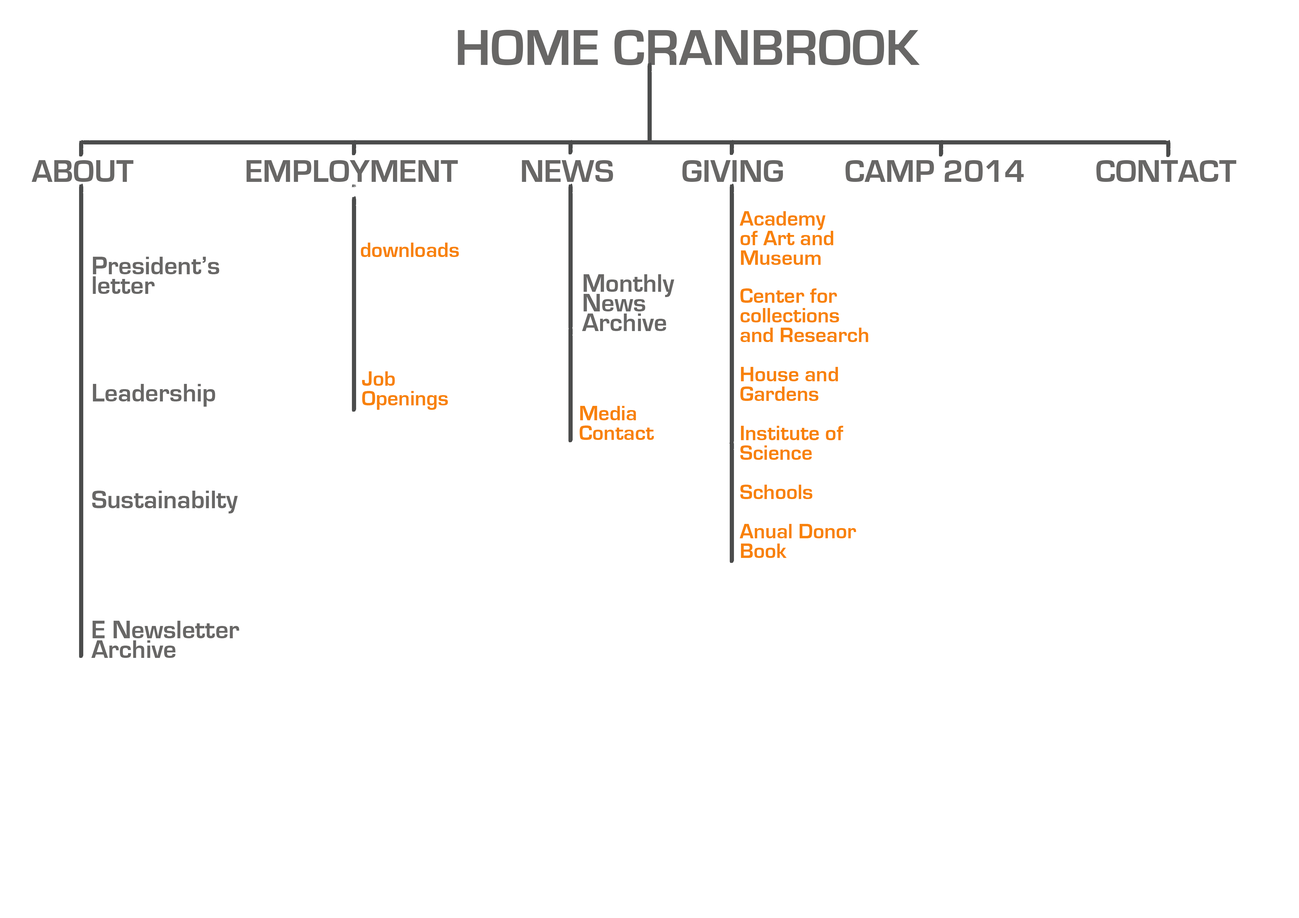
<style>
.page{position:relative;width:1299px;height:918px;background:#ffffff}
.page>*{position:absolute;margin:0}
.t1{font:52.4px "EurostileBold";color:#686766}
.t2{font:32.7px "EurostileBold";color:#686766}
.t3{font:21.8px/19.6px "EurostileBold";color:#f8810a}
.t4{font:21.8px "EurostileBold";color:#f8810a}
.t5{font:26.2px/19.6px "EurostileBold";color:#686766}
.t6{font:26.2px "EurostileBold";color:#686766}
</style>
<div class="page">
<p class="t1" style="left:458px;top:30px;width:462px;height:35px">HOME CRANBROOK</p>
<p class="t2" style="left:31px;top:160px;width:102px;height:22px">ABOUT</p>
<p class="t2" style="left:246px;top:160px;width:212px;height:22px">EMPLOYMENT</p>
<p class="t2" style="left:522px;top:160px;width:91px;height:22px">NEWS</p>
<p class="t2" style="left:682px;top:160px;width:101px;height:22px">GIVING</p>
<p class="t2" style="left:845px;top:160px;width:178px;height:22px">CAMP 2014</p>
<p class="t2" style="left:1096px;top:160px;width:140px;height:22px">CONTACT</p>
<p class="t3" style="left:739px;top:211px;width:94px;height:54px">Academy<br>of Art and<br>Museum</p>
<p class="t4" style="left:361px;top:243px;width:98px;height:14px">downloads</p>
<p class="t5" style="left:93px;top:257px;width:126px;height:37px">President’s<br>letter</p>
<p class="t5" style="left:582px;top:274px;width:92px;height:57px">Monthly <br>News <br>Archive</p>
<p class="t3" style="left:739px;top:288px;width:129px;height:270px">Center for<br>collections<br>and Research<br><br>House and<br>Gardens<br><br>Institute of<br>Science<br><br>Schools<br><br>Anual Donor<br>Book</p>
<p class="t3" style="left:362px;top:371px;width:86px;height:39px">Job<br>Openings</p>
<p class="t6" style="left:93px;top:384px;width:122px;height:23px">Leadership</p>
<p class="t3" style="left:579px;top:406px;width:75px;height:34px">Media<br>Contact</p>
<p class="t6" style="left:92px;top:491px;width:146px;height:23px">Sustainabilty</p>
<p class="t5" style="left:91px;top:621px;width:148px;height:37px">E Newsletter<br>Archive</p>
</div>
